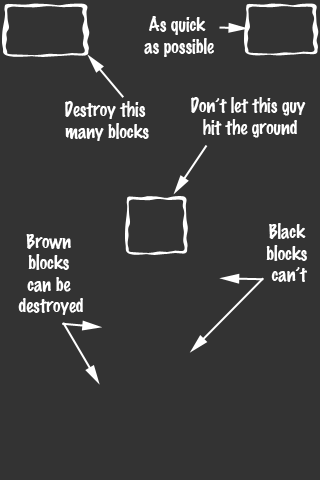
<style>
.page{position:relative;width:320px;height:480px;background:#333333}
.page>*{position:absolute;margin:0}
.t1{font:18px "MarkerFelt-Thin";color:#ffffff}
</style>
<div class="page">
<p class="t1" style="left:144px;top:16px;width:70px;height:41px;text-align:center">As quick <br>as possible</p>
<p class="t1" style="left:65px;top:101px;width:84px;height:40px;text-align:center">Destroy this <br>many blocks</p>
<p class="t1" style="left:191px;top:97px;width:115px;height:41px;text-align:center">Don’t let this guy <br>hit the ground</p>
<p class="t1" style="left:266px;top:223px;width:41px;height:59px;text-align:center">Black <br>blocks <br>can’t</p>
<p class="t1" style="left:18px;top:234px;width:65px;height:81px;text-align:center">Brown <br>blocks <br>can be <br>destroyed</p>
</div>
